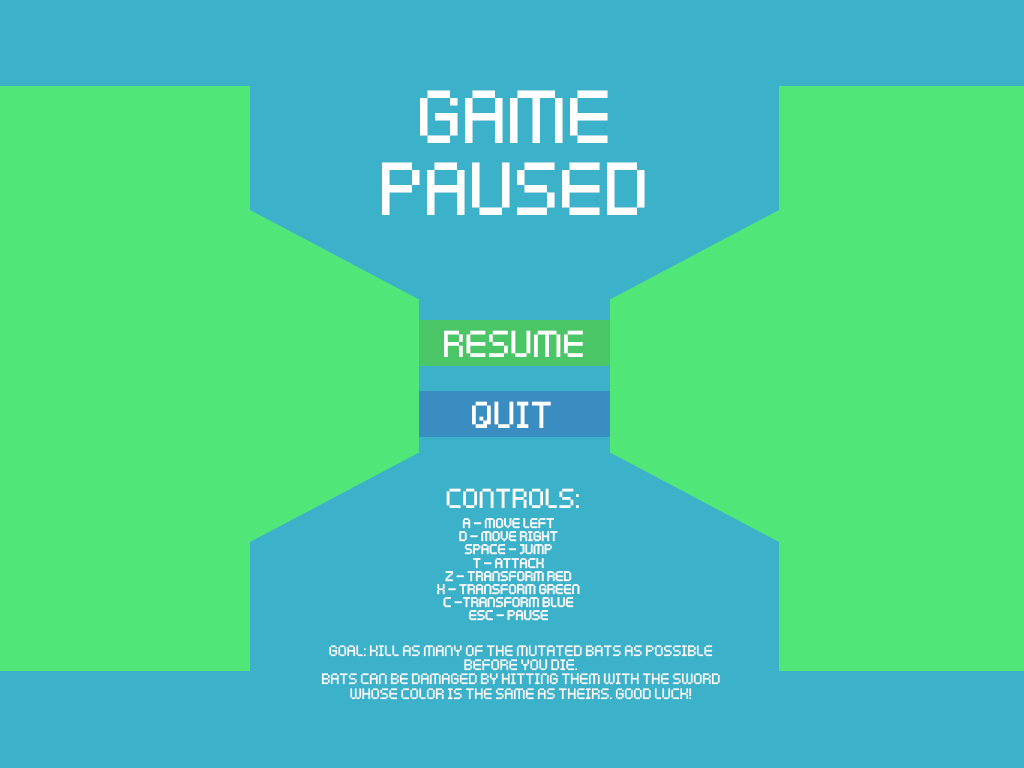
<style>
.page{position:relative;width:1024px;height:768px;background:#51e678}
.page>*{position:absolute;margin:0}
.t1{font:60px "KenPixel";color:#ffffff}
.t2{font:30px "KenPixel";color:#ffffff}
.t3{font:22px "KenPixel";color:#ffffff}
.t4{font:11px "KenPixel";color:#ffffff}
.t5{font:12px "KenPixel";color:#ffffff}
</style>
<div class="page">
<p class="t1" style="left:382px;top:90px;width:263px;height:125px;text-align:center">GAME<br>PAUSED</p>
<p class="t2" style="left:444px;top:330px;width:139px;height:27px">Resume</p>
<p class="t2" style="left:472px;top:401px;width:79px;height:27px">QUIT</p>
<p class="t3" style="left:446px;top:488px;width:133px;height:20px">Controls:</p>
<p class="t4" style="left:437px;top:518px;width:143px;height:103px;text-align:center">A - Move left<br>D - Move right<br>SPACE - Jump<br>T - attack<br>Z - Transform red<br>X - Transform Green<br>C -Transform blue<br>ESC - Pause</p>
<p class="t5" style="left:321px;top:645px;width:399px;height:55px;text-align:center">Goal: Kill as many of the mutated bats as possible before you die.<br>Bats can be damaged by hitting them with the sword whose color is the same as theirs. Good luck!</p>
</div>
